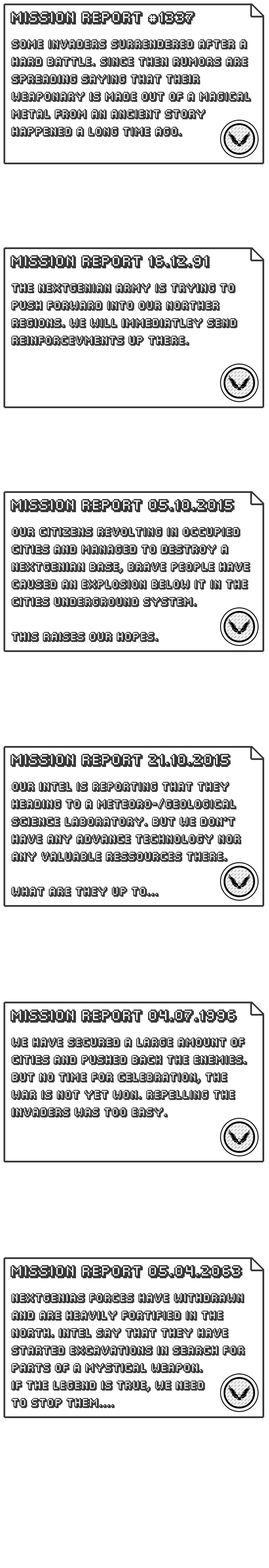
<style>
.page{position:relative;width:269px;height:1568px;background:#ffffff}
.page>*{position:absolute;margin:0}
.t1{font:10.5px "Fipps-Regular";color:#3a3a3a;text-transform:uppercase}
.t2{font:7.9px/17.5px "Fipps-Regular";color:#3a3a3a;text-transform:uppercase}
</style>
<div class="page">
<p class="t1" style="left:10px;top:11px;width:185px;height:13px">Mission Report #1337</p>
<p class="t2" style="left:11px;top:39px;width:241px;height:98px">Some invaders surrendered after a hard battle. Since then rumors are spreading saying that their  weaponary is made out of a magical metal from an ancient story happened a long time ago.</p>
<p class="t1" style="left:10px;top:255px;width:200px;height:13px">Mission Report 16.12.91</p>
<p class="t2" style="left:11px;top:283px;width:227px;height:63px">The NextgeniaN Army iS trying to push forward into our norther regions. We will immediatley Send reinforcevments up there.</p>
<p class="t1" style="left:10px;top:499px;width:225px;height:13px">Mission Report 05.10.2015</p>
<p class="t2" style="left:11px;top:527px;width:240px;height:115px">Our citizens revolting in occupied cities and managed to destroy A Nextgenian base, Brave people have caused an explosion below it in the cities underground system.<br><br>This raises our hopes.</p>
<p class="t1" style="left:10px;top:754px;width:221px;height:13px">Mission Report 21.10.2015</p>
<p class="t2" style="left:11px;top:782px;width:231px;height:115px">Our Intel is reporting that They heading to a meteoro-/Geological science laboratory. But We don’t have any Advance Technology nor any valuable ressources there.<br><br>What are they up to...</p>
<p class="t1" style="left:10px;top:1009px;width:227px;height:14px">Mission Report 04.07.1996</p>
<p class="t2" style="left:11px;top:1037px;width:237px;height:80px">We have secured a large amount of cities and pushed back the enemies. But no time for celebration, the war is not yet won. Repelling the Invaders was too easy.</p>
<p class="t1" style="left:10px;top:1265px;width:233px;height:13px">Mission Report 05.04.2063</p>
<p class="t2" style="left:11px;top:1293px;width:235px;height:115px">Nextgenias forces have withdrawn  and are heavily fortified in the north. Intel say that they have started excavations in search for parts of a Mystical weapon.<br>If the legend is true, we need<br>to stop them....</p>
</div>
